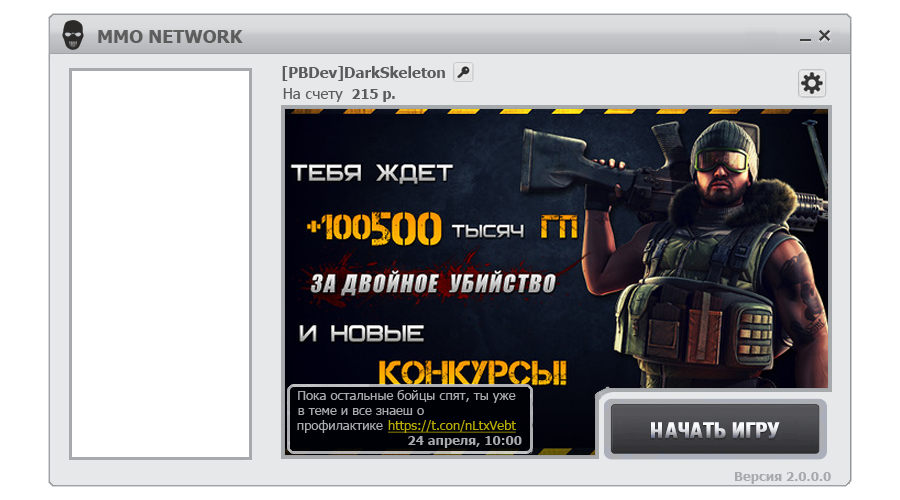
<style>
.page{position:relative;width:900px;height:500px;background:#ffffff}
.page>*{position:absolute;margin:0}
.t1{font:15px "Tahoma-Bold";color:#5b5b5b}
.t2{font:15px "Tahoma";color:#5b5b5b}
.t3{font:14px "Tahoma-Bold";color:#5b5b5b}
.t4{font:13px "Tahoma";color:#a7aaad}
.t5{font:13px "Tahoma";color:#b9ad04;text-decoration:underline}
.t6{font:13px "Tahoma-Bold";color:#a7aaad}
</style>
<div class="page">
<p class="t1" style="left:282px;top:66px;width:163px;height:15px">[PBDev]DarkSkeleton</p>
<p class="t2" style="left:283px;top:88px;width:112px;height:14px">На счету  <span class="t3">215 р.</span></p>
<p class="t4" style="left:298px;top:390px;width:218px;height:13px">Пока остальные бойцы спят, ты уже</p>
<p class="t4" style="left:298px;top:408px;width:126px;height:7px">в теме и все знаеш о</p>
<p class="t4" style="left:297px;top:420px;width:86px;height:13px">профилактике</p>
<p class="t5" style="left:388px;top:420px;width:128px;height:13px">https://t.con/nLtxVebt</p>
<p class="t6" style="left:408px;top:436px;width:114px;height:12px">24 апреля, 10:00</p>
<p class="t6" style="left:735px;top:472px;width:96px;height:12px">Версия 2.0.0.0</p>
</div>
